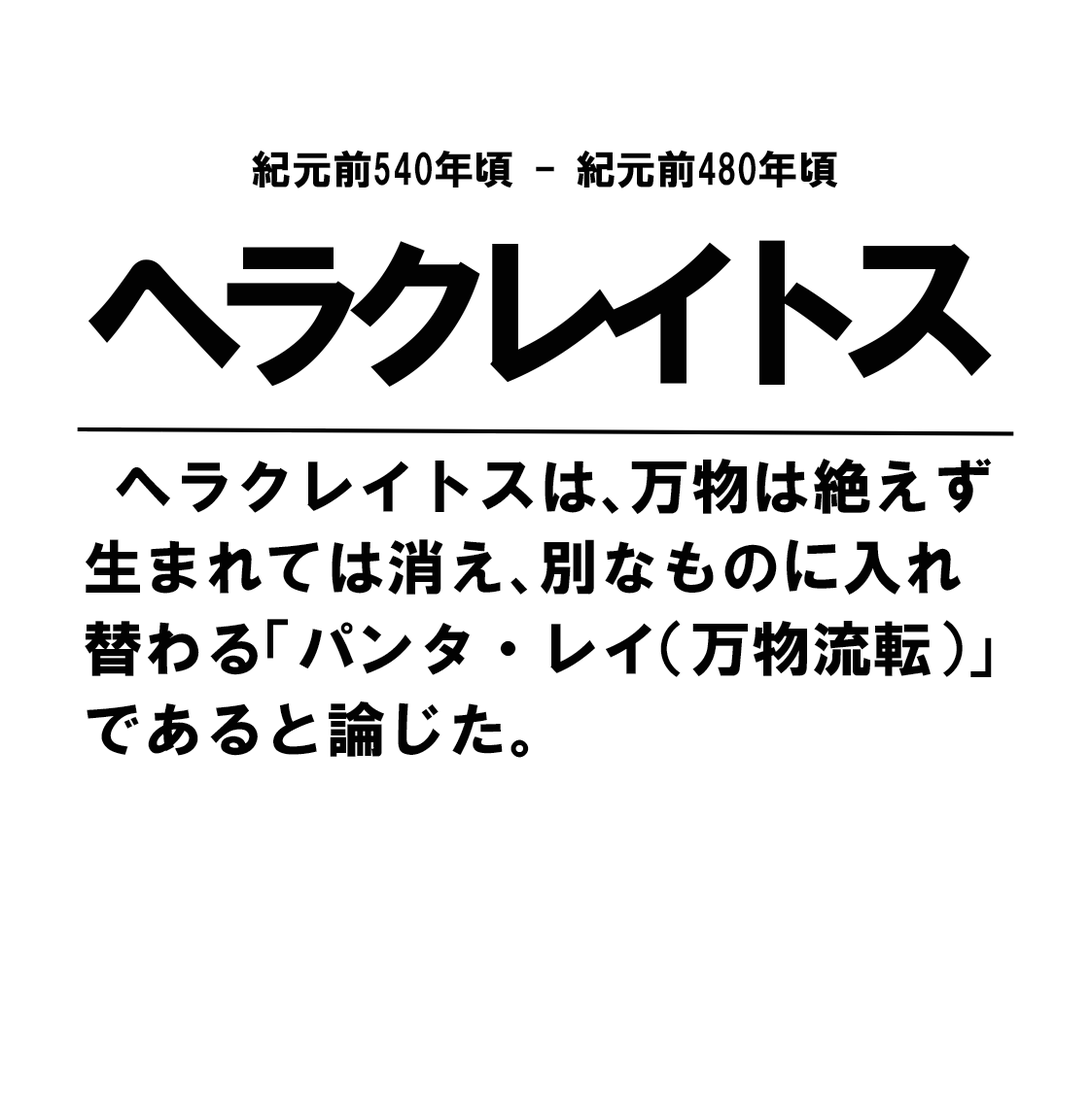
<style>
.page{position:relative;width:1091px;height:1093px;background:#ffffff}
.page>*{position:absolute;margin:0}
.t1{font:40.5px "HGSoeiKakugothicUB";color:#020202}
.t2{font:170.1px "HGSoeiKakugothicUB";letter-spacing:-0.26em;color:#020202}
.t3{font:60.7px/81px "HGSoeiKakugothicUB";color:#020202}
</style>
<div class="page">
<p class="t1" style="left:252px;top:150px;width:586px;height:39px">紀元前540年頃 - 紀元前480年頃</p>
<p class="t2" style="left:87px;top:240px;width:904px;height:147px">ヘラクレイトス</p>
<p class="t3" style="left:85px;top:458px;width:906px;height:300px">ヘラクレイトスは、万物は絶えず生まれては消え、別なものに入れ替わる「パンタ・レイ（万物流転）」であると論じた。</p>
</div>
